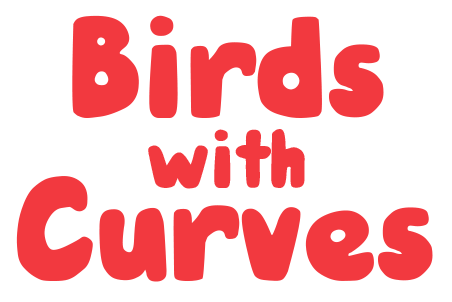
<style>
.page{position:relative;width:452px;height:302px;background:#ffffff}
.page>*{position:absolute;margin:0}
.t1{font:104.6px "DJBHUNKYCHUNK-Bold";color:#f2393f}
.t2{font:60px/37.1px "DJBHUNKYCHUNK-Bold";color:#f2393f}
</style>
<div class="page">
<p class="t1" style="left:16px;top:15px;width:417px;height:267px;text-align:center">Birds<br><span class="t2">with<br></span>Curves</p>
</div>
